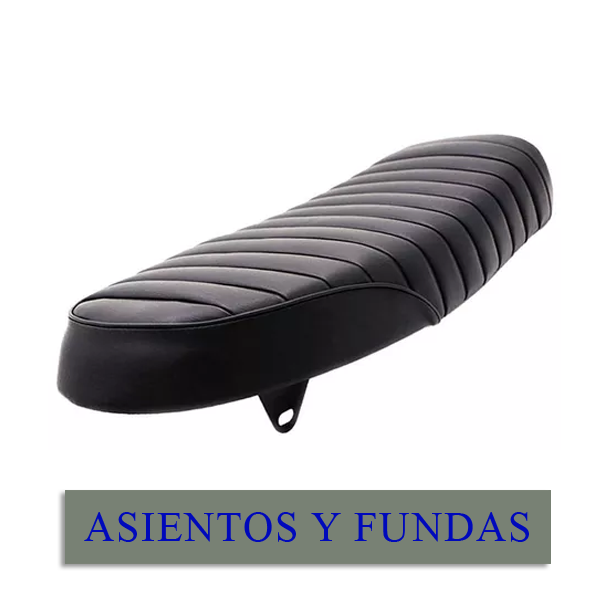
<style>
.page{position:relative;width:600px;height:600px;background:#ffffff}
.page>*{position:absolute;margin:0}
.t1{font:41.6px "TimesNewRomanPSMT";letter-spacing:0.05em;color:#0009bb;text-transform:uppercase}
</style>
<div class="page">
<p class="t1" style="left:84px;top:512px;width:445px;height:30px">asientos y fundas</p>
</div>
